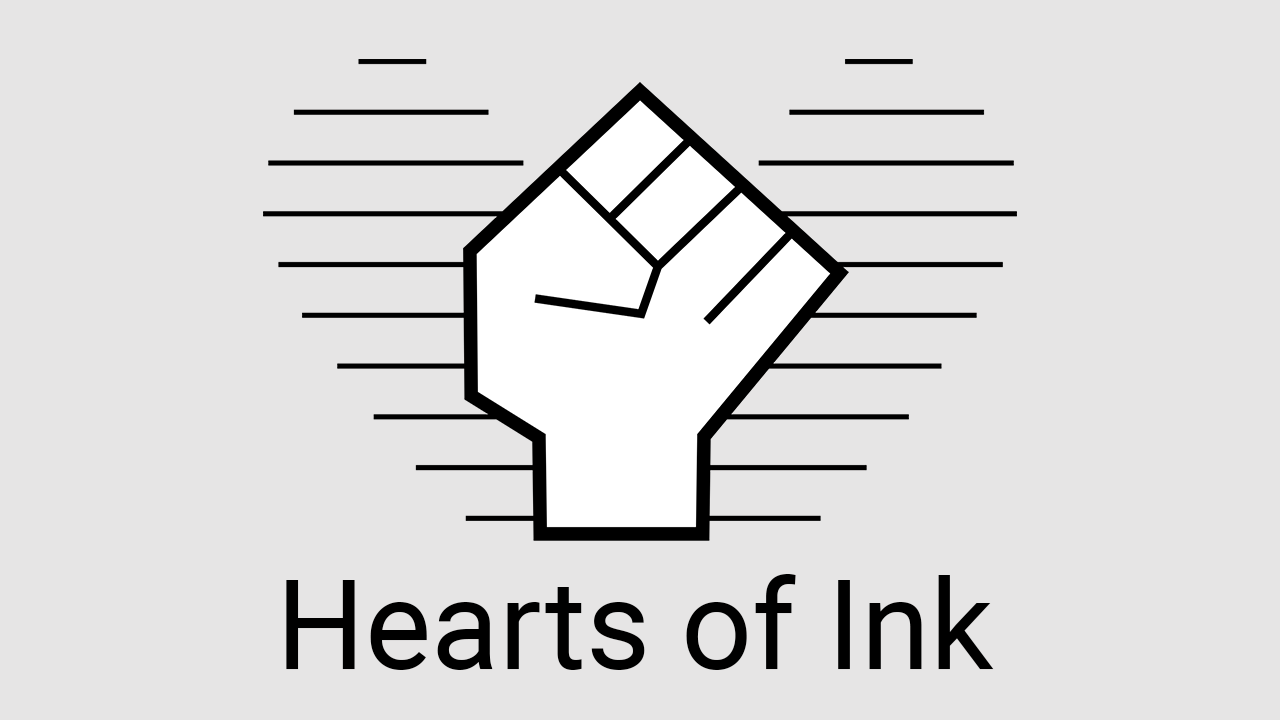
<style>
.page{position:relative;width:1280px;height:720px;background:#e6e5e5}
.page>*{position:absolute;margin:0}
.t1{font:125px "Roboto-Regular";color:#000000}
</style>
<div class="page">
<p class="t1" style="left:286px;top:574px;width:708px;height:96px">Hearts of Ink</p>
</div>
